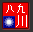
<style>
.page{position:relative;width:33px;height:32px;background:#f20000}
.page>*{position:absolute;margin:0}
.t1{font:10.4px "SimSun";color:#ffffff}
.t2{font:11.7px "SimSun";color:#ffffff}
</style>
<div class="page">
<p class="t1" style="left:6px;top:4px;width:19px;height:9px">八九</p>
<p class="t2" style="left:16px;top:15px;width:11px;height:12px">川</p>
</div>
